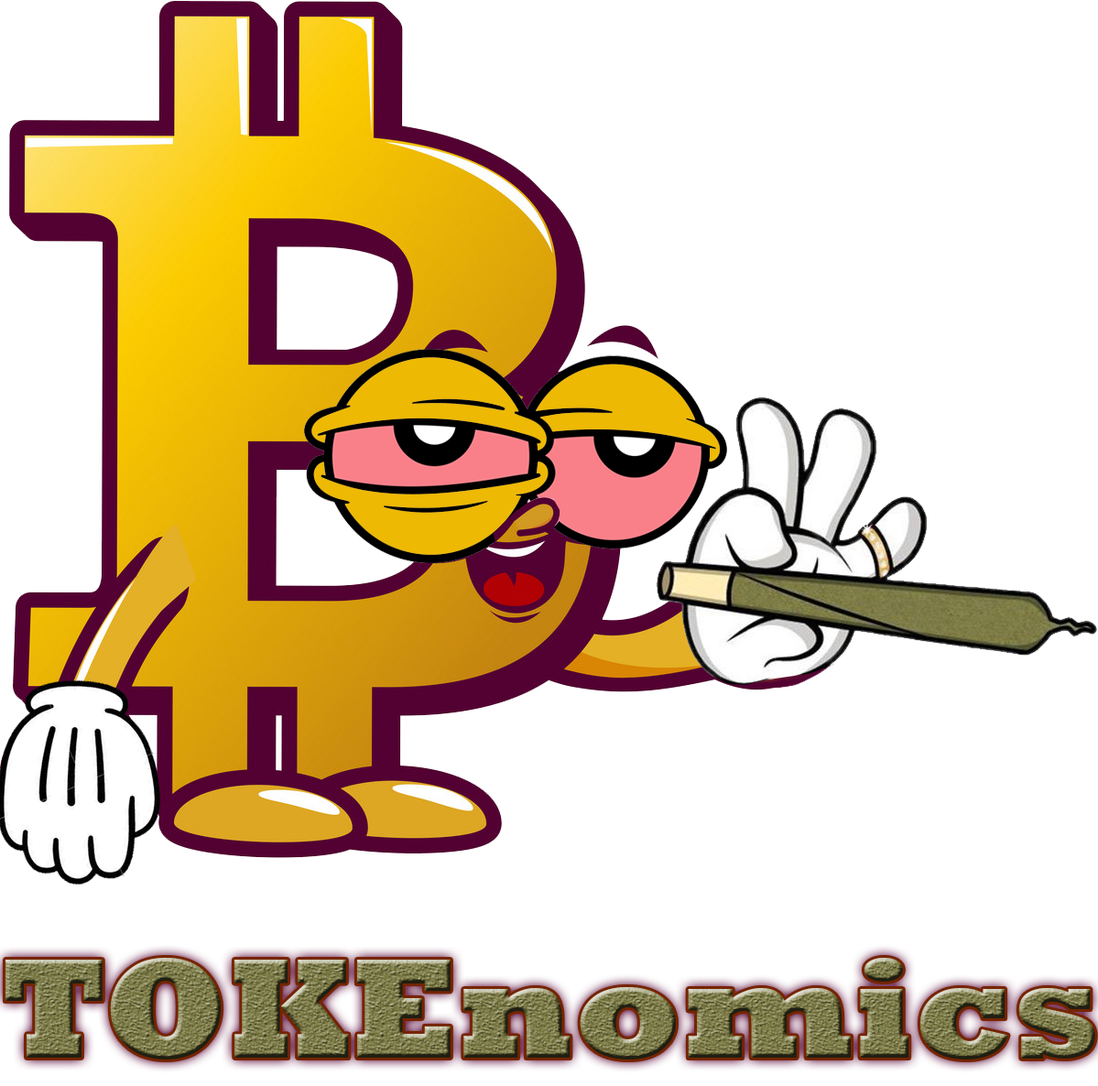
<style>
.page{position:relative;width:1098px;height:1086px;background:#ffffff}
.page>*{position:absolute;margin:0}
.t1{font:144.4px "Rockwell-ExtraBold"}
</style>
<div class="page">
<p class="t1" style="left:5px;top:958px;width:1090px;height:101px">TOKEnomics</p>
</div>
